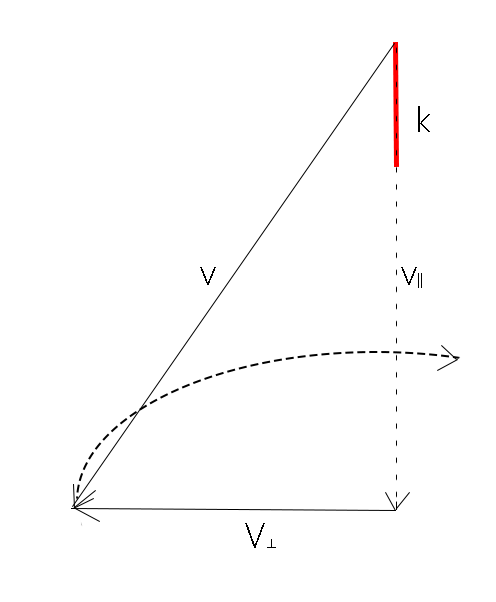
<style>
.page{position:relative;width:496px;height:602px;background:#ffffff}
.page>*{position:absolute;margin:0}
.t1{font:33.3px "MicrosoftYaHeiLight";color:#000000}
.t2{font:13.9px "MicrosoftYaHeiLight";color:#000000}
</style>
<div class="page">
<p class="t1" style="left:418px;top:106px;width:12px;height:26px">k</p>
<p class="t1" style="left:200px;top:267px;width:16px;height:18px">v</p>
<p class="t2" style="left:401px;top:267px;width:21px;height:21px"><span class="t1">v</span>||</p>
<p class="t1" style="left:245px;top:523px;width:31px;height:25px">V<span class="t2">⊥</span></p>
</div>
